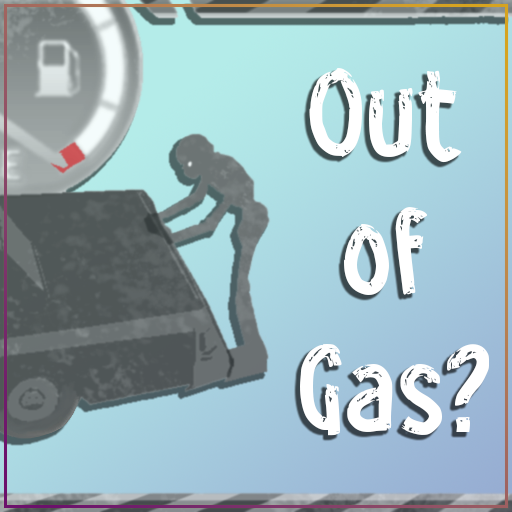
<style>
.page{position:relative;width:512px;height:512px}
.page>*{position:absolute;margin:0}
.t1{font:115.5px "gGrip";color:#ffffff}
</style>
<div class="page">
<p class="t1" style="left:300px;top:68px;width:189px;height:368px;text-align:center">Out <br>of <br>Gas?</p>
</div>
